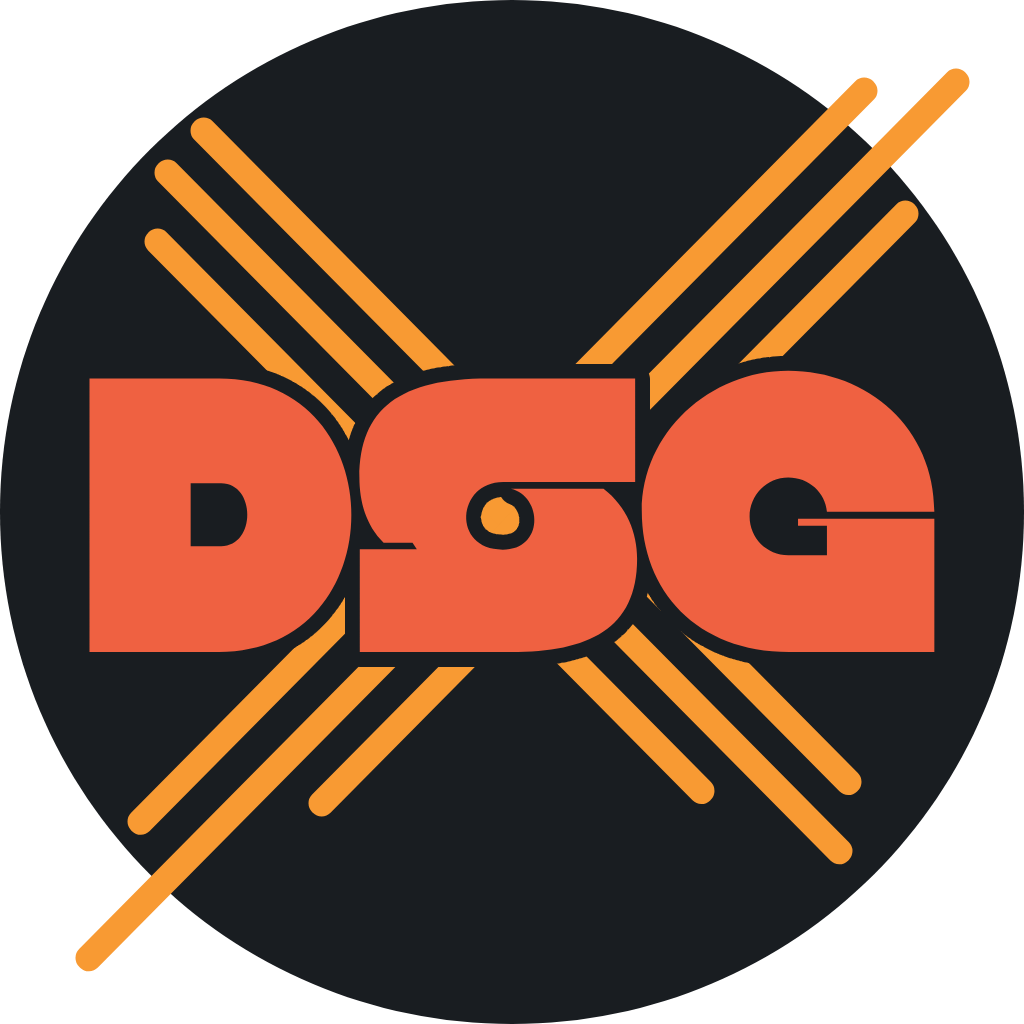
<style>
.page{position:relative;width:1024px;height:1024px;background:#191d21}
.page>*{position:absolute;margin:0}
.t1{font:390.6px "Null-Normal";color:#ef6141}
</style>
<div class="page">
<p class="t1" style="left:89px;top:370px;width:846px;height:282px">DSG</p>
</div>
